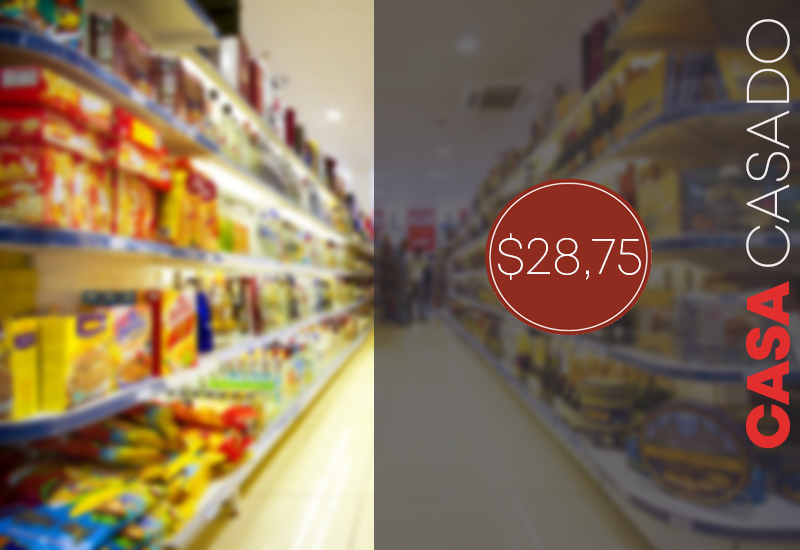
<style>
.page{position:relative;width:800px;height:550px}
.page>*{position:absolute;margin:0}
.t1{font:60px "Mont-ExtraLightDEMO";color:#f1ebeb}
.t2{font:60px "Mont-HeavyDEMO";color:#e32e2e}
.t3{font:53.3px "Mont-ExtraLightDEMO";color:#ffffff}
</style>
<div class="page">
<p class="t1" style="left:746px;top:19px;width:44px;height:430px;rotate:-90deg"><span class="t2">CASA </span>CASADO</p>
<p class="t3" style="left:498px;top:233px;width:143px;height:47px">$28,75</p>
</div>
